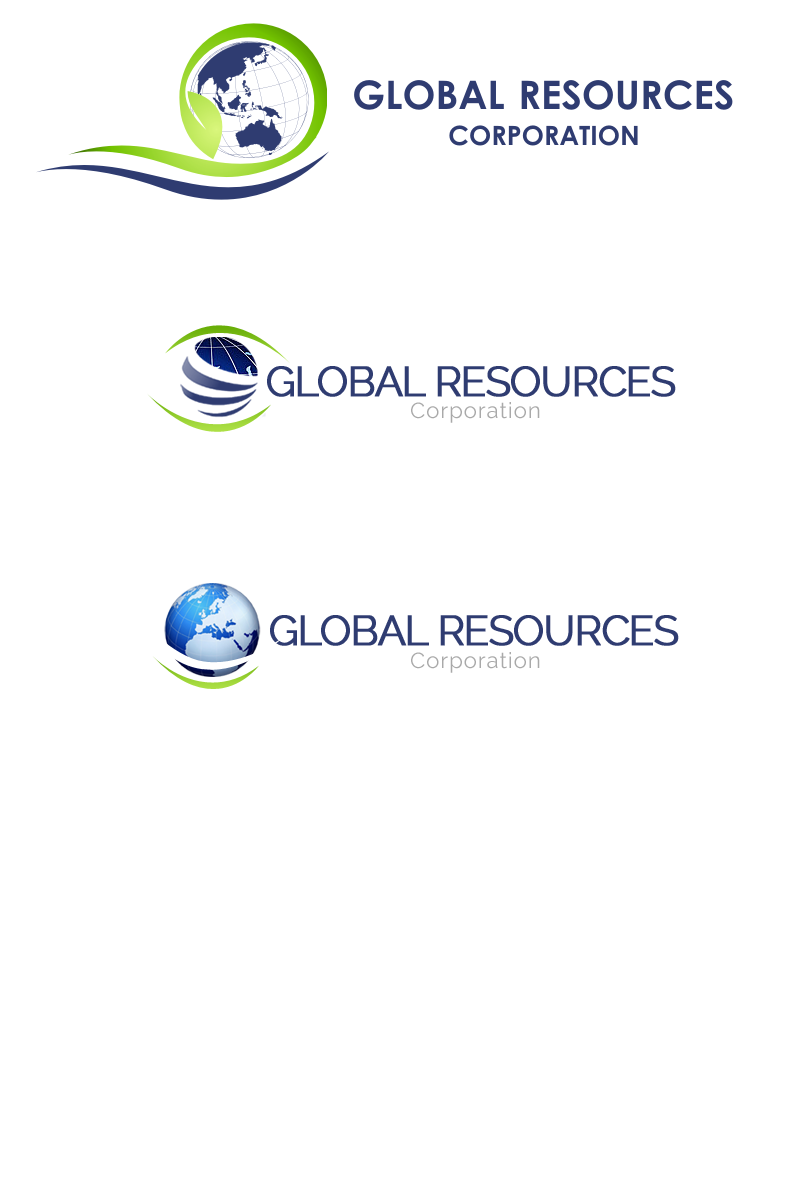
<style>
.page{position:relative;width:800px;height:1200px;background:#ffffff}
.page>*{position:absolute;margin:0}
.t1{font:42px "Raleway";letter-spacing:-0.05em;color:#2f3c71;text-transform:uppercase;font-weight:bold}
.t2{font:22px "Raleway";letter-spacing:0.05em;color:#a9a9a9}
</style>
<div class="page">
<p class="t1" style="left:267px;top:366px;width:409px;height:31px">Global resources</p>
<p class="t2" style="left:411px;top:402px;width:129px;height:21px">Corporation</p>
<p class="t1" style="left:270px;top:615px;width:409px;height:31px">Global resources</p>
<p class="t2" style="left:411px;top:652px;width:129px;height:21px">Corporation</p>
</div>
